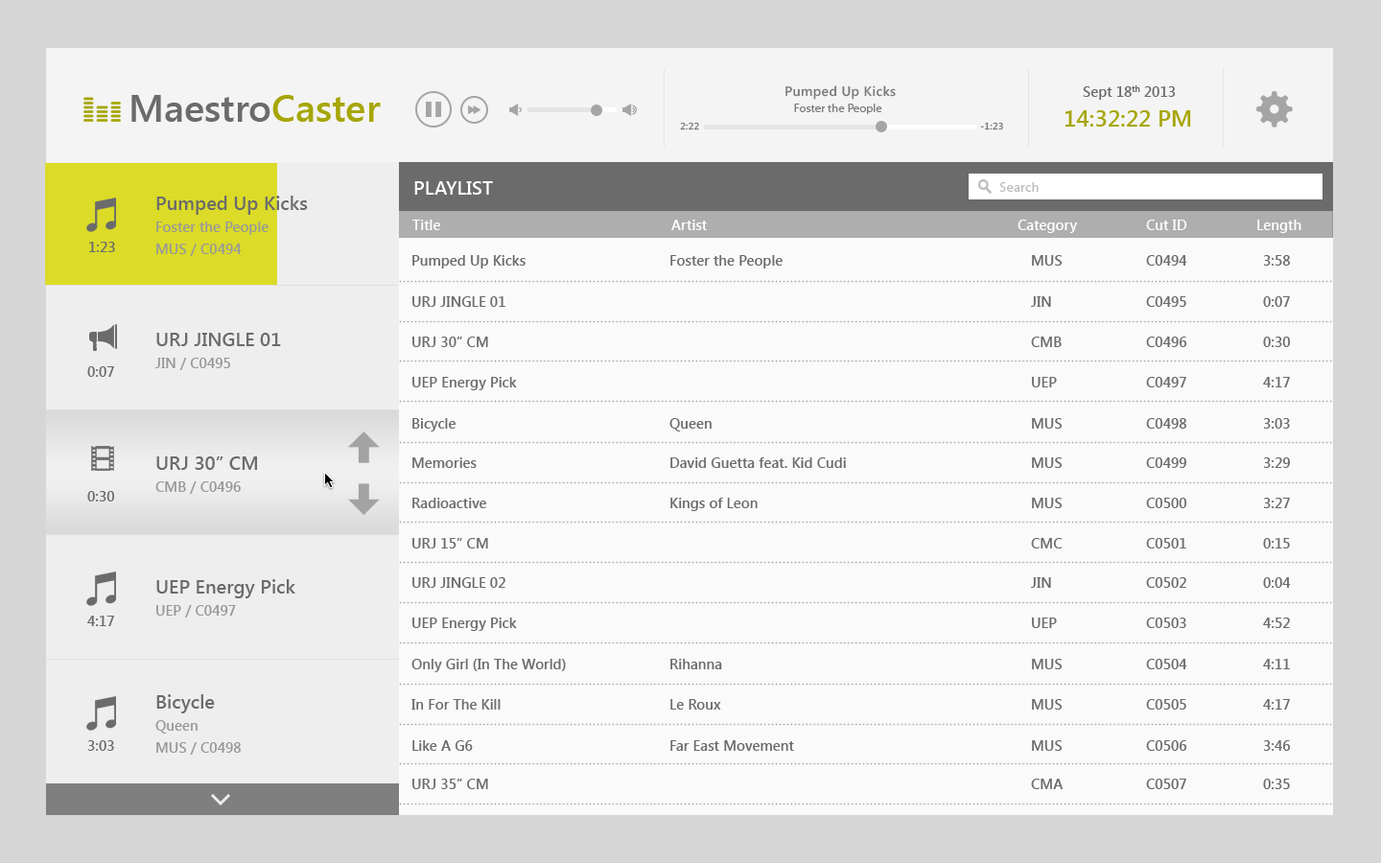
<style>
.page{position:relative;width:1381px;height:863px;background:#fafafa}
.page>*{position:absolute;margin:0}
.t1{font:13.4px "SegoeUI-SemiBold";letter-spacing:0.025em;color:#7b7b7b}
.t2{font:14.4px "SegoeUI-SemiBold";color:#6b6b6b}
.t3{font:38.4px "SegoeUI-SemiBold";color:#6b6b6b}
.t4{font:38.4px "SegoeUI-SemiBold";color:#a6a608}
.t5{font:11.5px "MyriadPro-Regular";letter-spacing:0.025em;color:#7b7b7b}
.t6{font:23px "SegoeUI-SemiBold";color:#a6a608}
.t7{font:9.6px "SegoeUI-SemiBold";letter-spacing:0.025em;color:#7b7b7b}
.t8{font:19.2px "SegoeUI-SemiBold";color:#ffffff}
.t9{font:13.4px "MyriadPro-Regular";letter-spacing:0.025em;color:#bababa}
.t10{font:14.4px/22.1px "SegoeUI-SemiBold";color:#989898}
.t11{font:19.2px/22.1px "SegoeUI-SemiBold";color:#6b6b6b}
.t12{font:14.4px "SegoeUI-SemiBold";color:#ffffff}
</style>
<div class="page">
<p class="t1" style="left:786px;top:85px;width:110px;height:15px">Pumped Up Kicks</p>
<p class="t2" style="left:1083px;top:85px;width:93px;height:15px">Sept 18th 2013</p>
<p class="t3" style="left:131px;top:95px;width:250px;height:27px">Maestro<span class="t4">Caster</span></p>
<p class="t5" style="left:794px;top:104px;width:88px;height:10px">Foster the People</p>
<p class="t6" style="left:1066px;top:110px;width:125px;height:17px">14:32:22 PM</p>
<p class="t7" style="left:680px;top:122px;width:19px;height:8px">2:22</p>
<p class="t7" style="left:980px;top:122px;width:23px;height:8px">-1:23</p>
<p class="t8" style="left:414px;top:181px;width:79px;height:14px">PLAYLIST</p>
<p class="t9" style="left:999px;top:182px;width:40px;height:10px">Search</p>
<p class="t10" style="left:156px;top:196px;width:152px;height:60px"><span class="t11">Pumped Up Kicks<br></span>Foster the People<br>MUS / C0494</p>
<p class="t12" style="left:412px;top:220px;width:28px;height:10px">Title</p>
<p class="t12" style="left:671px;top:220px;width:36px;height:10px">Artist</p>
<p class="t12" style="left:1018px;top:220px;width:59px;height:13px">Category</p>
<p class="t12" style="left:1146px;top:220px;width:42px;height:10px">Cut ID</p>
<p class="t12" style="left:1258px;top:220px;width:44px;height:13px">Length</p>
<p class="t2" style="left:89px;top:242px;width:26px;height:10px">1:23</p>
<p class="t2" style="left:412px;top:255px;width:114px;height:14px">Pumped Up Kicks</p>
<p class="t2" style="left:670px;top:255px;width:113px;height:14px">Foster the People</p>
<p class="t2" style="left:1032px;top:255px;width:31px;height:11px">MUS</p>
<p class="t2" style="left:1146px;top:255px;width:42px;height:11px">C0494</p>
<p class="t2" style="left:1263px;top:255px;width:27px;height:11px">3:58</p>
<p class="t2" style="left:412px;top:296px;width:94px;height:11px">URJ JINGLE 01</p>
<p class="t2" style="left:1031px;top:296px;width:20px;height:11px">JIN</p>
<p class="t2" style="left:1146px;top:296px;width:41px;height:11px">C0495</p>
<p class="t2" style="left:1263px;top:296px;width:27px;height:11px">0:07</p>
<p class="t11" style="left:155px;top:333px;width:126px;height:37px">URJ JINGLE 01<span class="t10"><br>JIN / C0495</span></p>
<p class="t2" style="left:412px;top:337px;width:76px;height:10px">URJ 30” CM</p>
<p class="t2" style="left:1031px;top:337px;width:31px;height:10px">CMB</p>
<p class="t2" style="left:1146px;top:337px;width:42px;height:10px">C0496</p>
<p class="t2" style="left:1263px;top:337px;width:28px;height:10px">0:30</p>
<p class="t2" style="left:87px;top:366px;width:27px;height:11px">0:07</p>
<p class="t2" style="left:412px;top:377px;width:105px;height:13px">UEP Energy Pick</p>
<p class="t2" style="left:1032px;top:377px;width:25px;height:11px">UEP</p>
<p class="t2" style="left:1146px;top:377px;width:41px;height:11px">C0497</p>
<p class="t2" style="left:1263px;top:377px;width:27px;height:11px">4:17</p>
<p class="t2" style="left:412px;top:418px;width:44px;height:14px">Bicycle</p>
<p class="t2" style="left:670px;top:418px;width:42px;height:14px">Queen</p>
<p class="t2" style="left:1032px;top:418px;width:31px;height:11px">MUS</p>
<p class="t2" style="left:1146px;top:418px;width:41px;height:11px">C0498</p>
<p class="t2" style="left:1263px;top:418px;width:27px;height:11px">3:03</p>
<p class="t10" style="left:155px;top:457px;width:102px;height:37px"><span class="t11">URJ 30” CM</span><br>CMB / C0496</p>
<p class="t2" style="left:412px;top:458px;width:65px;height:10px">Memories</p>
<p class="t2" style="left:670px;top:458px;width:176px;height:10px">David Guetta feat. Kid Cudi</p>
<p class="t2" style="left:1032px;top:458px;width:31px;height:10px">MUS</p>
<p class="t2" style="left:1146px;top:458px;width:41px;height:10px">C0499</p>
<p class="t2" style="left:1263px;top:458px;width:27px;height:10px">3:29</p>
<p class="t2" style="left:87px;top:491px;width:28px;height:11px">0:30</p>
<p class="t2" style="left:412px;top:498px;width:74px;height:10px">Radioactive</p>
<p class="t2" style="left:670px;top:498px;width:88px;height:13px">Kings of Leon</p>
<p class="t2" style="left:1032px;top:498px;width:31px;height:10px">MUS</p>
<p class="t2" style="left:1146px;top:498px;width:42px;height:10px">C0500</p>
<p class="t2" style="left:1263px;top:498px;width:27px;height:10px">3:27</p>
<p class="t2" style="left:412px;top:538px;width:76px;height:11px">URJ 15” CM</p>
<p class="t2" style="left:1031px;top:538px;width:31px;height:11px">CMC</p>
<p class="t2" style="left:1146px;top:538px;width:41px;height:11px">C0501</p>
<p class="t2" style="left:1263px;top:538px;width:27px;height:11px">0:15</p>
<p class="t11" style="left:156px;top:579px;width:139px;height:39px">UEP Energy Pick<span class="t10"><br>UEP / C0497</span></p>
<p class="t2" style="left:412px;top:577px;width:94px;height:11px">URJ JINGLE 02</p>
<p class="t2" style="left:1031px;top:577px;width:20px;height:11px">JIN</p>
<p class="t2" style="left:1146px;top:577px;width:41px;height:11px">C0502</p>
<p class="t2" style="left:1263px;top:577px;width:28px;height:11px">0:04</p>
<p class="t2" style="left:87px;top:616px;width:27px;height:10px">4:17</p>
<p class="t2" style="left:412px;top:618px;width:105px;height:13px">UEP Energy Pick</p>
<p class="t2" style="left:1032px;top:618px;width:25px;height:10px">UEP</p>
<p class="t2" style="left:1146px;top:618px;width:41px;height:10px">C0503</p>
<p class="t2" style="left:1263px;top:618px;width:27px;height:10px">4:52</p>
<p class="t2" style="left:412px;top:659px;width:154px;height:13px">Only Girl (In The World)</p>
<p class="t2" style="left:670px;top:659px;width:52px;height:11px">Rihanna</p>
<p class="t2" style="left:1032px;top:659px;width:31px;height:11px">MUS</p>
<p class="t2" style="left:1146px;top:659px;width:42px;height:11px">C0504</p>
<p class="t2" style="left:1263px;top:659px;width:27px;height:11px">4:11</p>
<p class="t10" style="left:155px;top:694px;width:86px;height:61px"><span class="t11">Bicycle<br></span>Queen<br>MUS / C0498</p>
<p class="t2" style="left:412px;top:699px;width:89px;height:11px">In For The Kill</p>
<p class="t2" style="left:670px;top:699px;width:51px;height:11px">Le Roux</p>
<p class="t2" style="left:1032px;top:699px;width:31px;height:11px">MUS</p>
<p class="t2" style="left:1146px;top:699px;width:41px;height:11px">C0505</p>
<p class="t2" style="left:1263px;top:699px;width:27px;height:11px">4:17</p>
<p class="t2" style="left:87px;top:741px;width:27px;height:10px">3:03</p>
<p class="t2" style="left:412px;top:741px;width:61px;height:10px">Like A G6</p>
<p class="t2" style="left:670px;top:741px;width:124px;height:10px">Far East Movement</p>
<p class="t2" style="left:1032px;top:741px;width:31px;height:10px">MUS</p>
<p class="t2" style="left:1146px;top:741px;width:42px;height:10px">C0506</p>
<p class="t2" style="left:1263px;top:741px;width:28px;height:10px">3:46</p>
<p class="t2" style="left:412px;top:779px;width:76px;height:10px">URJ 35” CM</p>
<p class="t2" style="left:1031px;top:779px;width:33px;height:10px">CMA</p>
<p class="t2" style="left:1146px;top:779px;width:41px;height:10px">C0507</p>
<p class="t2" style="left:1263px;top:779px;width:27px;height:10px">0:35</p>
</div>
